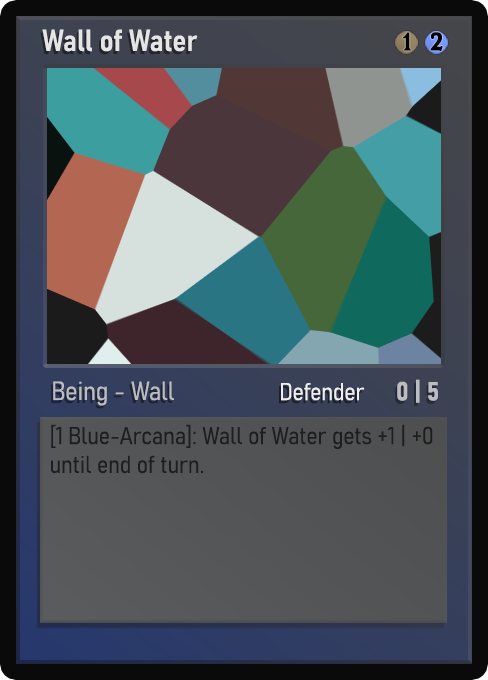
<style>
.page{position:relative;width:488px;height:680px}
.page>*{position:absolute;margin:0}
.t1{font:30px "Bahnschrift-SemiBoldSemiCondensed";color:#f2f2f2;font-weight:bold}
.t2{font:25px "WTRRoycroft";color:#000000;font-weight:bold;scale:1.09 1}
.t3{font:26px "Bahnschrift-LightSemiCondensed";color:#c8c8c8;font-weight:bold}
.t4{font:24px "Bahnschrift-LightSemiCondensed";color:#f0efef;font-weight:bold}
.t5{font:26px "Bahnschrift-BoldSemiCondensed";color:#bcbdc0;font-weight:bold}
.t6{font:24px "Bahnschrift-LightSemiCondensed";color:#1e1e1e;font-weight:bold}
</style>
<div class="page">
<p class="t1" style="left:42px;top:29px;width:156px;height:23px;opacity:0.9">Wall of Water</p>
<p class="t2" style="left:403px;top:32px;width:8px;height:19px">1</p>
<p class="t2" style="left:430px;top:32px;width:13px;height:19px">2</p>
<p class="t3" style="left:53px;top:381px;width:121px;height:25px;opacity:0.9">Being - Wall</p>
<p class="t4" style="left:281px;top:383px;width:84px;height:18px">Defender</p>
<p class="t5" style="left:397px;top:379px;width:41px;height:24px">0 | 5</p>
<p class="t6" style="left:51px;top:424px;width:382px;height:50px">[1 Blue-Arcana]: Wall of Water gets +1 | +0 until end of turn.</p>
</div>
